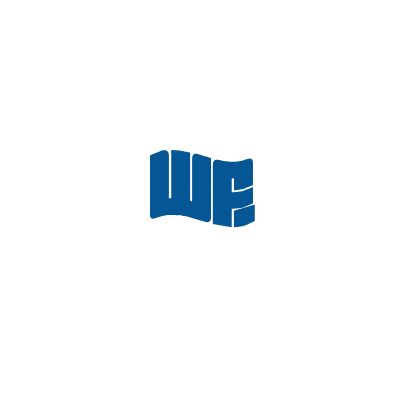
<style>
.page{position:relative;width:400px;height:400px;background:#ffffff}
.page>*{position:absolute;margin:0}
.t1{font:90px "Pincoyablack-Black";color:#045694}
</style>
<div class="page">
<p class="t1" style="left:150px;top:149px;width:105px;height:79px">wf</p>
</div>
